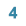
<style>
.page{position:relative;width:26px;height:26px;background:#ffffff}
.page>*{position:absolute;margin:0}
.t1{font:16px "Arial-BoldMT";color:#3686a5}
</style>
<div class="page">
<p class="t1" style="left:8px;top:6px;width:10px;height:13px">4</p>
</div>
